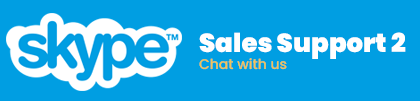
<style>
.page{position:relative;width:420px;height:101px;background:#009ee2}
.page>*{position:absolute;margin:0}
.t1{font:26px "Poppins-Black";color:#ffffff}
.t2{font:14px "Poppins-Medium";color:#f2c557}
</style>
<div class="page">
<p class="t1" style="left:199px;top:32px;width:207px;height:38px">Sales Support 2<br><span class="t2">Chat with us</span></p>
</div>
